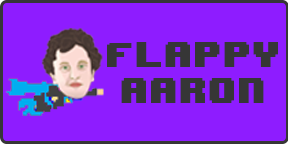
<style>
.page{position:relative;width:288px;height:144px;background:#8e1cff}
.page>*{position:absolute;margin:0}
.t1{font:29.8px "8BITWONDERNominal";color:#363636}
</style>
<div class="page">
<p class="t1" style="left:107px;top:42px;width:171px;height:61px;text-align:center">Flappy<br>aaron</p>
</div>
